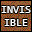
<style>
.page{position:relative;width:32px;height:32px;background:#996633}
.page>*{position:absolute;margin:0}
.t1{font:11px "Consolas";color:#ffffff}
</style>
<div class="page">
<p class="t1" style="left:1px;top:6px;width:30px;height:20px;text-align:center">INVIS<br>IBLE</p>
</div>
